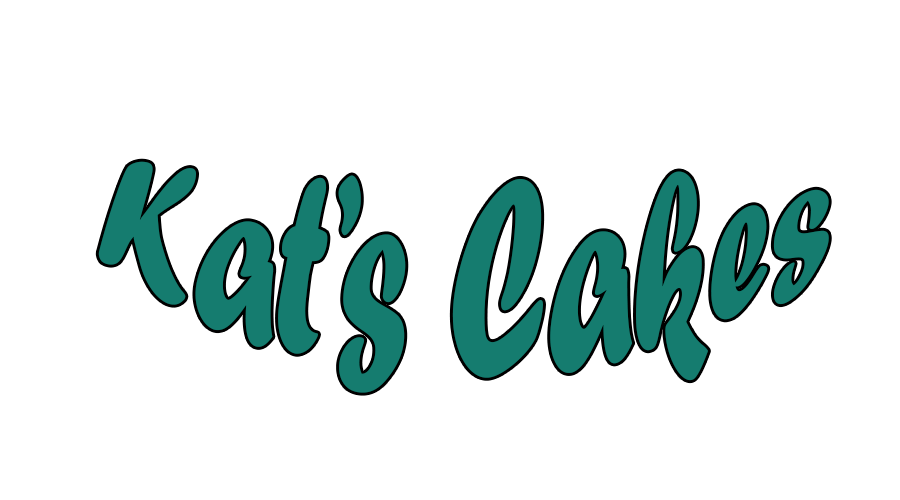
<style>
.page{position:relative;width:900px;height:500px;background:#ffffff}
.page>*{position:absolute;margin:0}
.t1{font:150px "ForteMT";color:#157c6f}
</style>
<div class="page">
<p class="t1" style="left:98px;top:161px;width:731px;height:232px">Kat’s Cakes</p>
</div>
